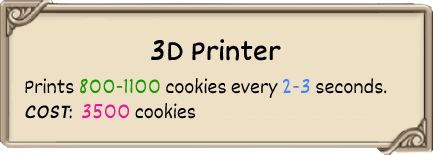
<style>
.page{position:relative;width:433px;height:155px;background:#ede0c4}
.page>*{position:absolute;margin:0}
.t1{font:30px "Dekko";color:#000000;font-weight:bold}
.t2{font:21px "Dekko";color:#000000}
.t3{font:21px "Dekko";color:#1b9902}
.t4{font:21px "Dekko";color:#4086fa}
.t5{font:21px "Dekko";color:#000000;font-weight:bold;font-style:italic}
.t6{font:21px "Dekko";color:#f0129a}
</style>
<div class="page">
<p class="t1" style="left:151px;top:39px;width:130px;height:22px">3D Printer</p>
<p class="t2" style="left:25px;top:77px;width:362px;height:42px">Prints <span class="t3">800-1100 </span>cookies every <span class="t4">2-3 </span>seconds.<br><span class="t5">COST</span>:  <span class="t6">3500 </span>cookies</p>
</div>
